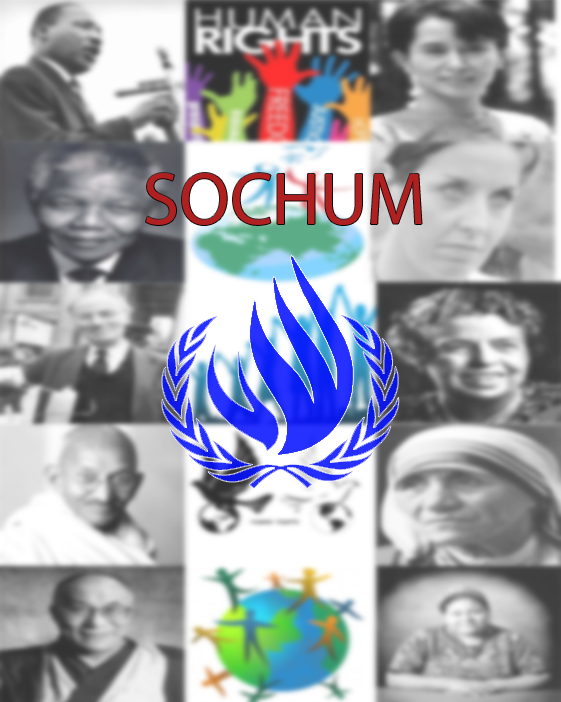
<style>
.page{position:relative;width:561px;height:702px}
.page>*{position:absolute;margin:0}
.t1{font:73.6px "CenturyGothic-Bold";color:#b12020}
</style>
<div class="page">
<p class="t1" style="left:146px;top:173px;width:276px;height:52px">SOCHUM</p>
</div>
